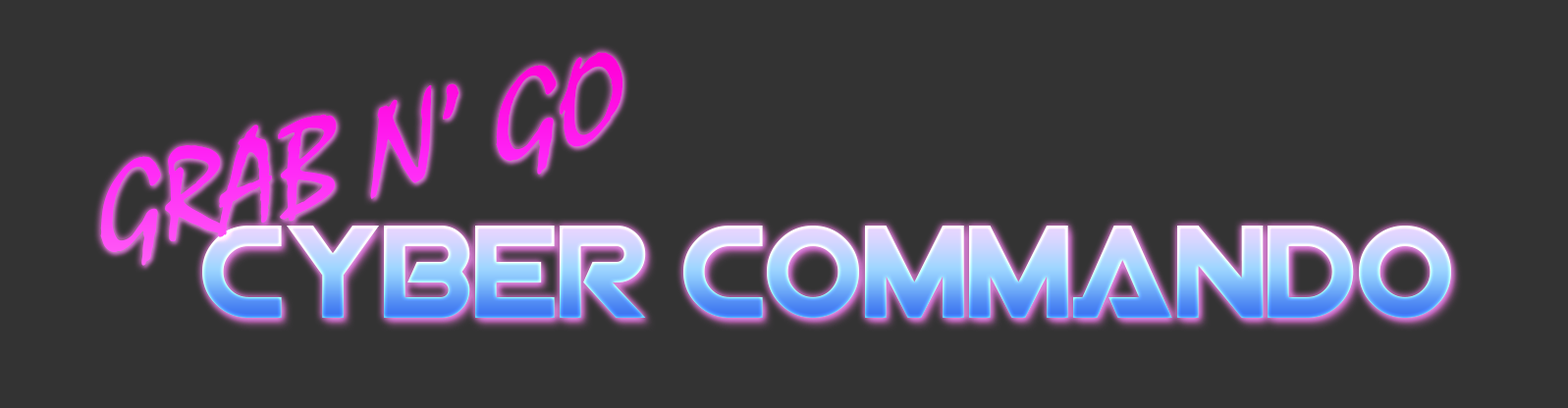
<style>
.page{position:relative;width:1568px;height:408px;background:#333333}
.page>*{position:absolute;margin:0}
.t1{font:131.7px "Mistral";font-style:italic}
.t2{font:131.7px "ViperSquadronSolid"}
</style>
<div class="page">
<p class="t1" style="left:100px;top:52px;width:523px;height:214px;rotate:-13deg">GRAB N’ GO</p>
<p class="t2" style="left:202px;top:226px;width:1249px;height:92px">CYBER COMMANDO</p>
</div>
